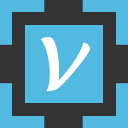
<style>
.page{position:relative;width:128px;height:128px;background:#52bae1}
.page>*{position:absolute;margin:0}
.t1{font:91.7px "LucidaHandwriting-Italic";color:#ffffff;font-weight:bold;font-style:italic}
</style>
<div class="page">
<p class="t1" style="left:41px;top:37px;width:49px;height:55px">v</p>
</div>
